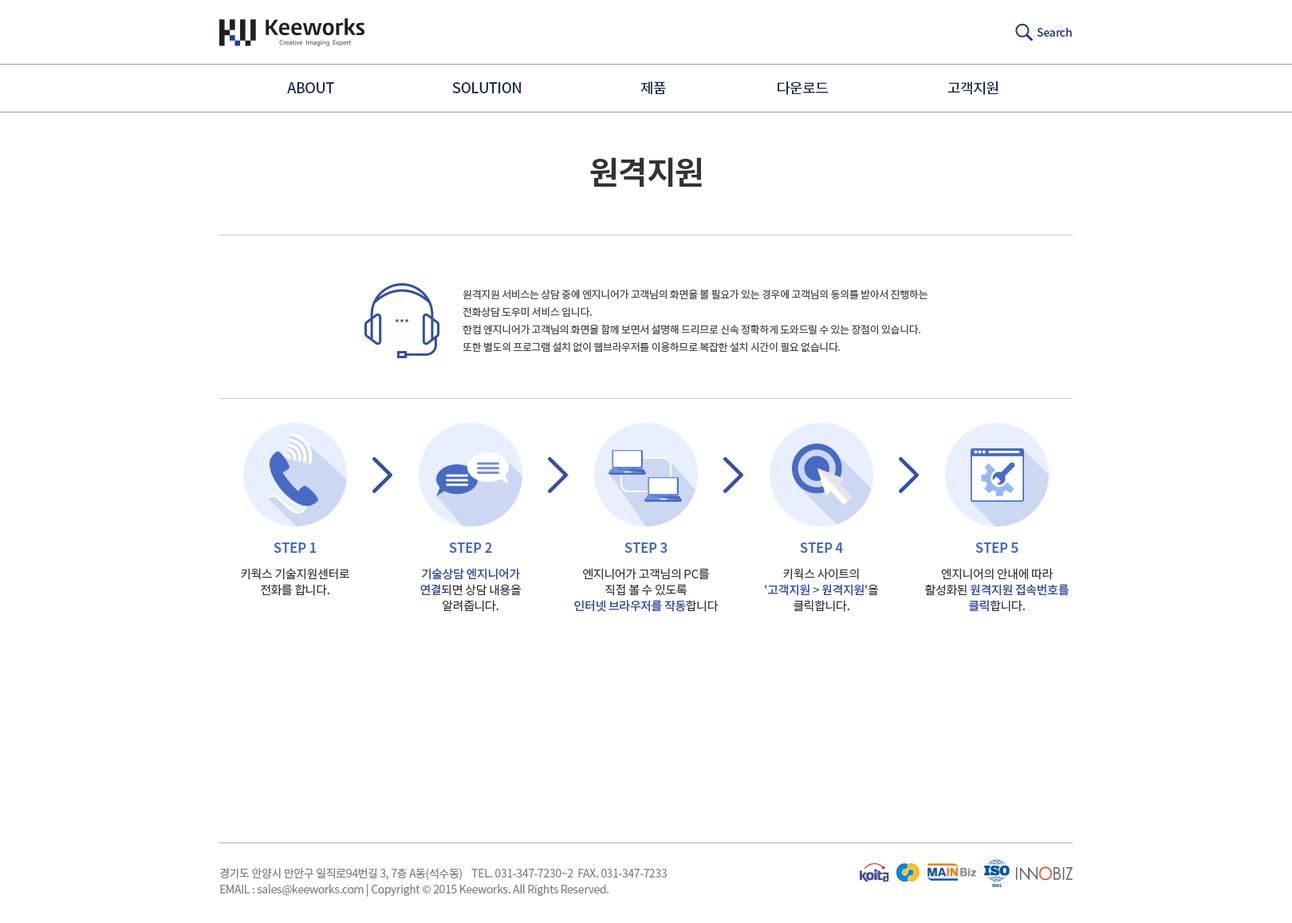
<style>
.page{position:relative;width:1292px;height:923px;background:#ffffff}
.page>*{position:absolute;margin:0}
.t1{font:11.2px "NotoSansCJKkr-Medium";letter-spacing:-0.025em;color:#1b3780}
.t2{font:14.4px "NotoSansCJKkr-Medium";letter-spacing:-0.025em;color:#1c3053;text-transform:uppercase}
.t3{font:31.9px "NotoSansCJKkr-Bold";letter-spacing:-0.025em;color:#333333}
.t4{font:10.4px/17.5px "NotoSansCJKkr-Regular";letter-spacing:-0.025em;color:#4d4d4d}
.t5{font:13.6px "NotoSansCJKkr-Bold";letter-spacing:-0.025em;color:#486ac2}
.t6{font:12px/16px "NotoSansCJKkr-Regular";letter-spacing:-0.025em;color:#333333}
.t7{font:12px/16px "NotoSansCJKkr-Medium";letter-spacing:-0.025em;color:#33509c}
.t8{font:11.2px/16px "NotoSansCJKkr-Regular";letter-spacing:-0.025em;color:#808080}
</style>
<div class="page">
<p class="t1" style="left:1037px;top:27px;width:35px;height:10px">Search</p>
<p class="t2" style="left:287px;top:82px;width:47px;height:11px">ABOUT</p>
<p class="t2" style="left:452px;top:82px;width:70px;height:11px">SOLUTION</p>
<p class="t2" style="left:640px;top:81px;width:26px;height:14px">제품</p>
<p class="t2" style="left:778px;top:81px;width:50px;height:14px">다운로드</p>
<p class="t2" style="left:948px;top:81px;width:51px;height:14px">고객지원</p>
<p class="t3" style="left:590px;top:157px;width:112px;height:30px">원격지원</p>
<p class="t4" style="left:463px;top:289px;width:465px;height:64px">원격지원 서비스는 상담 중에 엔지니어가 고객님의 화면을 볼 필요가 있는 경우에 고객님의 동의를 받아서 진행하는<br>전화상담 도우미 서비스 입니다. <br>한컴 엔지니어가 고객님의 화면을 함께 보면서 설명해 드리므로 신속 정확하게 도와드릴 수 있는 장점이 있습니다. <br>또한 별도의 프로그램 설치 없이 웹브라우저를 이용하므로 복잡한 설치 시간이 필요 없습니다.</p>
<p class="t5" style="left:274px;top:542px;width:43px;height:11px">STEP 1</p>
<p class="t5" style="left:449px;top:542px;width:43px;height:11px">STEP 2</p>
<p class="t5" style="left:625px;top:542px;width:43px;height:11px">STEP 3</p>
<p class="t5" style="left:800px;top:542px;width:43px;height:11px">STEP 4</p>
<p class="t5" style="left:975px;top:542px;width:44px;height:11px">STEP 5</p>
<p class="t6" style="left:241px;top:568px;width:108px;height:28px;text-align:center">키웍스 기술지원센터로<br>전화를 합니다.</p>
<p class="t6" style="left:420px;top:568px;width:101px;height:44px;text-align:center"><span class="t7">기술상담 엔지니어가<br>연결</span>되면 상담 내용을<br>알려줍니다.</p>
<p class="t6" style="left:574px;top:568px;width:145px;height:44px;text-align:center">엔지니어가 고객님의 PC를<br>직접 볼 수 있도록<br><span class="t7">인터넷 브라우저를 작동</span>합니다</p>
<p class="t7" style="left:765px;top:568px;width:113px;height:44px;text-align:center"><span class="t6">키웍스 사이트의<br></span>'고객지원 &gt; 원격지원'<span class="t6">을<br>클릭합니다.</span></p>
<p class="t6" style="left:925px;top:568px;width:145px;height:44px;text-align:center">엔지니어의 안내에 따라<br>활성화된 <span class="t7">원격지원 접속번호를<br>클릭</span>합니다.</p>
<p class="t8" style="left:220px;top:868px;width:447px;height:29px">경기도 안양시 만안구 일직로94번길 3, 7층 A동(석수동)    TEL. 031-347-7230~2  FAX. 031-347-7233<br>EMAIL : sales@keeworks.com | Copyright © 2015 Keeworks. All Rights Reserved.</p>
</div>
